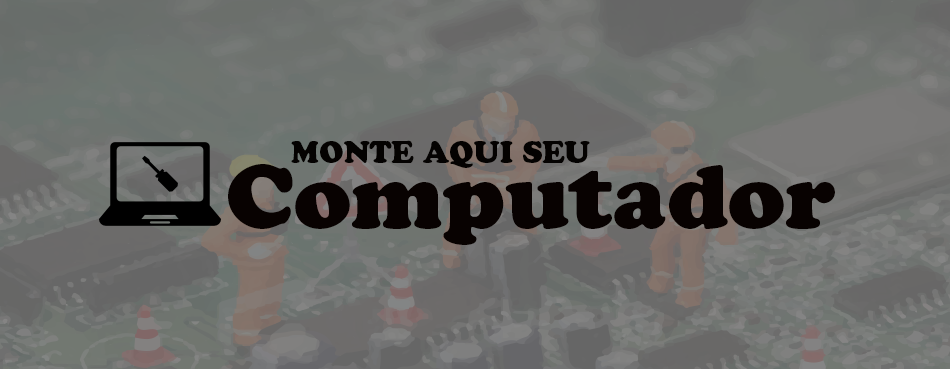
<style>
.page{position:relative;width:950px;height:369px}
.page>*{position:absolute;margin:0}
.t1{font:30px "CooperBlackStd";color:#040201}
.t2{font:90px "CooperBlackStd";color:#080201}
</style>
<div class="page">
<p class="t1" style="left:291px;top:140px;width:299px;height:28px">MONTE AQUI SEU</p>
<p class="t2" style="left:228px;top:164px;width:607px;height:81px">Computador</p>
</div>
